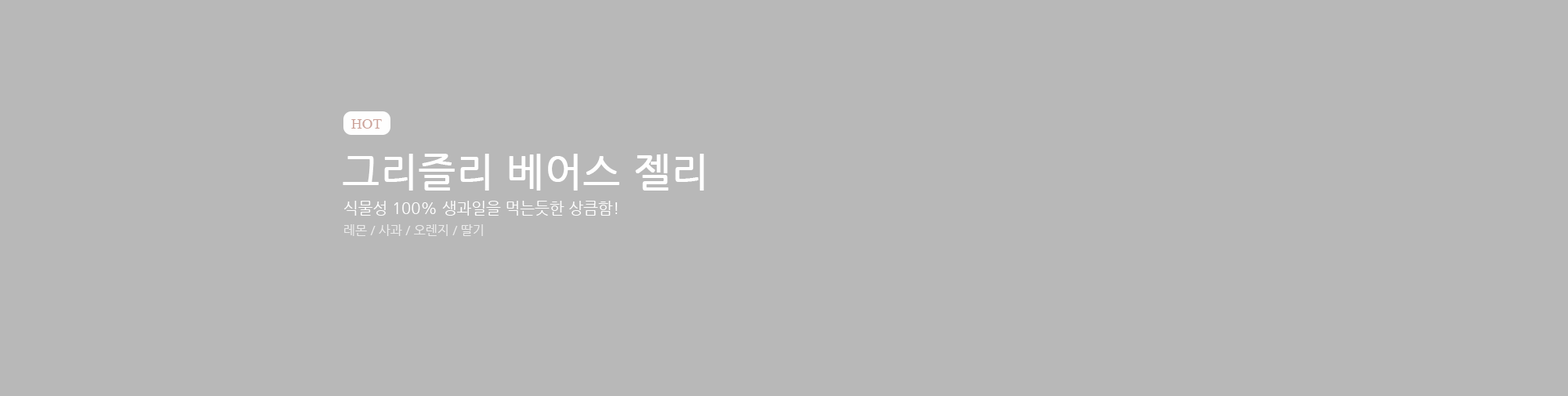
<style>
.page{position:relative;width:1568px;height:396px;background:#b8b8b8}
.page>*{position:absolute;margin:0}
.t1{font:14.9px "TimesNewRomanPSMT";color:#cca299}
.t2{font:39.5px "NanumGothic";color:#ffffff;font-weight:bold}
.t3{font:15.7px "NanumGothic";color:#ffffff}
.t4{font:12.5px "NanumGothic";color:#ececec}
</style>
<div class="page">
<p class="t1" style="left:351px;top:119px;width:31px;height:10px">HOT</p>
<p class="t2" style="left:343px;top:154px;width:361px;height:37px">그리즐리 베어스 젤리</p>
<p class="t3" style="left:344px;top:201px;width:273px;height:15px">식물성 100% 생과일을 먹는듯한 상큼함!</p>
<p class="t4" style="left:344px;top:224px;width:139px;height:12px">레몬 / 사과 / 오렌지 / 딸기</p>
</div>
